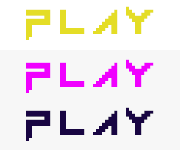
<style>
.page{position:relative;width:180px;height:150px;background:#f7f7f7}
.page>*{position:absolute;margin:0}
.t1{font:48.5px "Vermin-Vibes-1989";letter-spacing:0.12em;color:#e4dd26}
.t2{font:48.5px "Vermin-Vibes-1989";letter-spacing:0.12em;color:#f000ff}
.t3{font:48.5px "Vermin-Vibes-1989";letter-spacing:0.12em;color:#180542}
</style>
<div class="page">
<p class="t1" style="left:26px;top:6px;width:128px;height:34px">PLAY</p>
<p class="t2" style="left:26px;top:59px;width:128px;height:34px">PLAY</p>
<p class="t3" style="left:26px;top:107px;width:128px;height:34px">PLAY</p>
</div>
